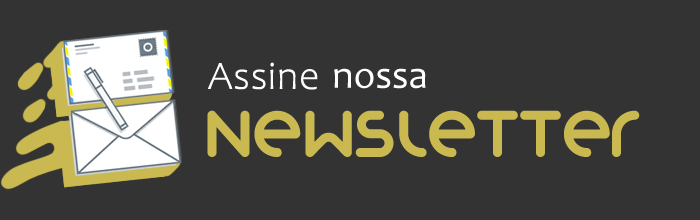
<style>
.page{position:relative;width:700px;height:220px;background:#333333}
.page>*{position:absolute;margin:0}
.t1{font:39.8px "Candara-Light";color:#fefefe;font-weight:bold}
.t2{font:39.8px "Candara";color:#ffffff}
.t3{font:72px "Organocoloredversionat:logomagazin.comorgano-font";color:#c9b950;text-transform:uppercase}
</style>
<div class="page">
<p class="t1" style="left:208px;top:62px;width:110px;height:28px">Assine</p>
<p class="t2" style="left:334px;top:68px;width:92px;height:21px">nossa</p>
<p class="t3" style="left:207px;top:110px;width:433px;height:47px">Newsletter</p>
</div>
